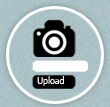
<style>
.page{position:relative;width:110px;height:107px}
.page>*{position:absolute;margin:0}
.t1{font:8.9px "Tahoma";color:#ffffff}
</style>
<div class="page">
<p class="t1" style="left:37px;top:76px;width:27px;height:10px">Upload</p>
</div>
